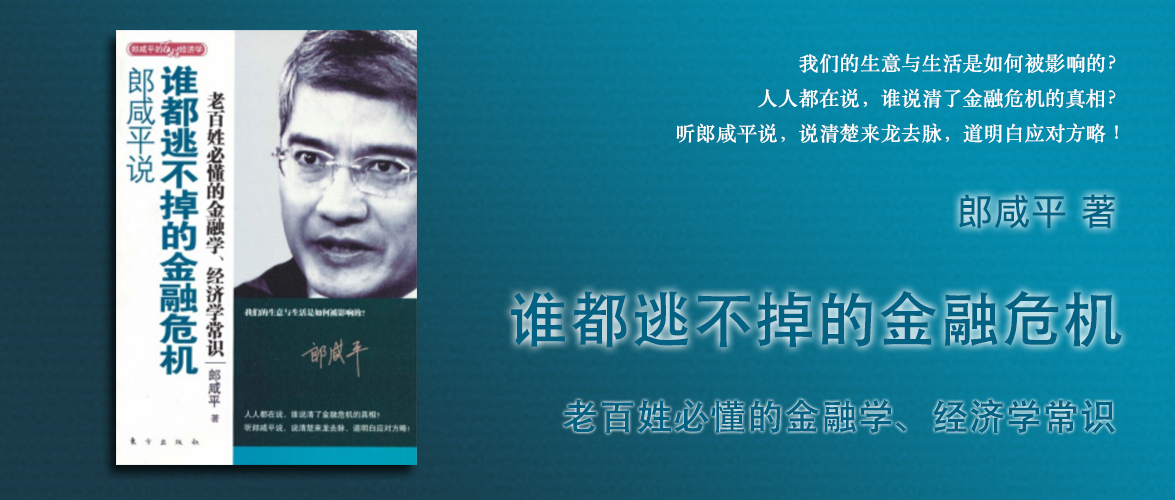
<style>
.page{position:relative;width:1175px;height:500px}
.page>*{position:absolute;margin:0}
.t1{font:20px "STSongti-SC-Regular";color:#ffffff;font-weight:bold}
.t2{font:36px "PingFangSC-Regular";color:#016283;font-weight:bold}
.t3{font:60px "STHeiti";color:#016283;font-weight:bold}
.t4{font:36px "AdobeHeitiStd-Regular";color:#016283;font-weight:bold}
</style>
<div class="page">
<p class="t1" style="left:676px;top:53px;width:442px;height:90px;text-align:right">我们的生意与生活是如何被影响的？<br>人人都在说，谁说清了金融危机的真相？<br>听郎咸平说，说清楚来龙去脉，道明白应对方略！</p>
<p class="t2" style="left:959px;top:194px;width:156px;height:35px">郎咸平 著</p>
<p class="t3" style="left:511px;top:290px;width:611px;height:58px">谁都逃不掉的金融危机</p>
<p class="t4" style="left:563px;top:399px;width:552px;height:35px">老百姓必懂的金融学、经济学常识</p>
</div>
